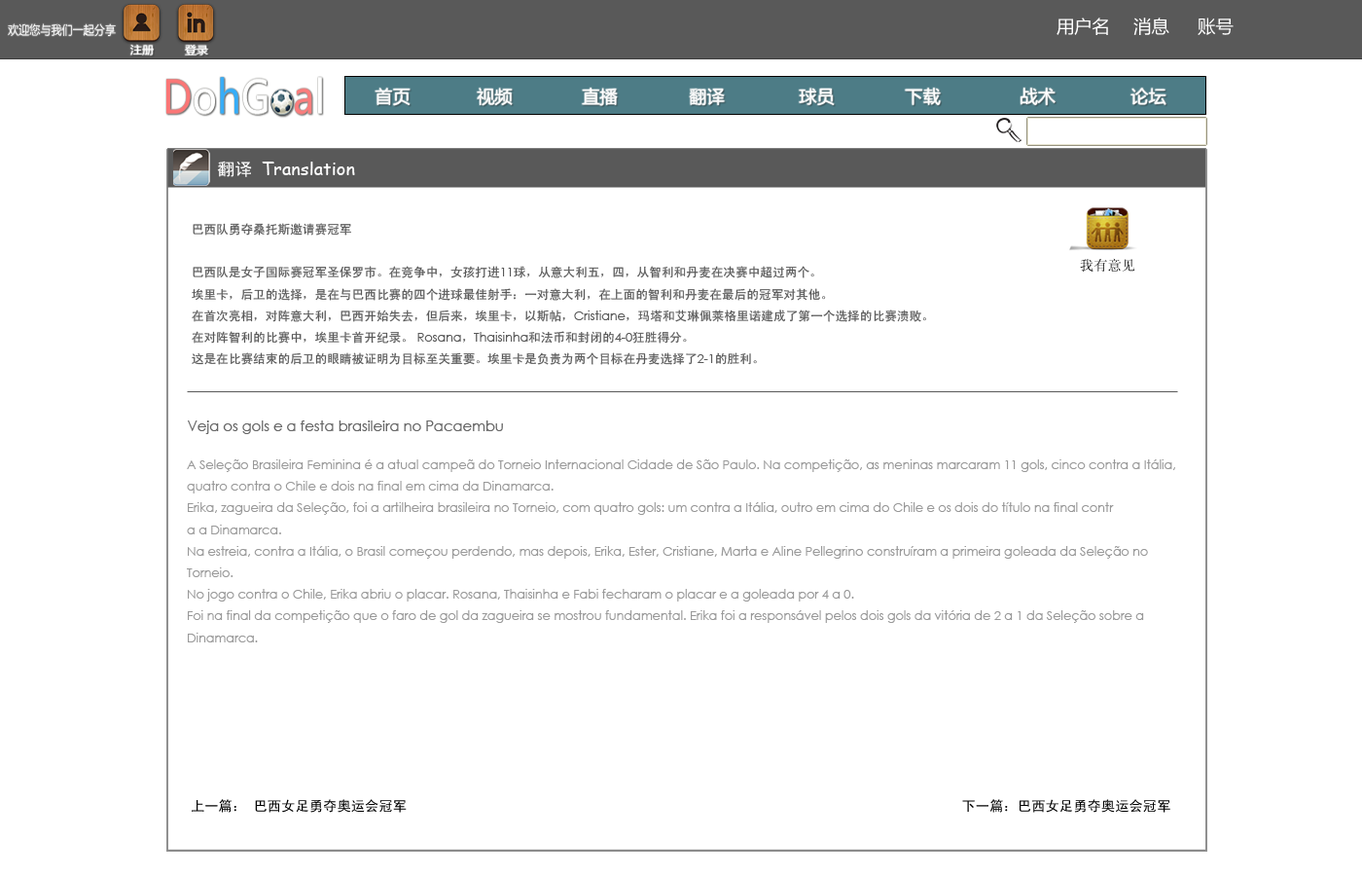
<style>
.page{position:relative;width:1362px;height:876px;background:#ffffff}
.page>*{position:absolute;margin:0}
.t1{font:17.8px "MicrosoftYaHei";color:#ffffff}
.t2{font:12.4px "MicrosoftYaHei";color:#ffffff;scale:0.87 1}
.t3{font:11px "MicrosoftYaHei";color:#ffffff;scale:1.05 1}
.t4{font:17.8px "ComicSansMS";color:#ffffff}
.t5{font:17.8px "SimHei";color:#ffffff}
.t6{font:12.3px "SimHei";color:#595959}
.t7{font:13.9px "SimSun";color:#000000}
.t8{font:12.3px "CenturyGothic";color:#595959}
.t9{font:14.3px "CenturyGothic";color:#666666}
.t10{font:12.3px "CenturyGothic";color:#999999}
.t11{font:13.9px "SimHei";color:#000000}
</style>
<div class="page">
<p class="t1" style="left:1056px;top:18px;width:52px;height:17px">用户名</p>
<p class="t1" style="left:1133px;top:18px;width:36px;height:17px">消息</p>
<p class="t1" style="left:1198px;top:18px;width:36px;height:17px">账号</p>
<p class="t2" style="left:8px;top:23px;width:108px;height:14px">欢迎您与我们一起分享</p>
<p class="t3" style="left:130px;top:44px;width:24px;height:11px">注册</p>
<p class="t3" style="left:185px;top:45px;width:23px;height:10px">登录</p>
<p class="t1" style="left:375px;top:88px;width:36px;height:18px">首页</p>
<p class="t1" style="left:477px;top:88px;width:36px;height:18px">视频</p>
<p class="t1" style="left:582px;top:88px;width:36px;height:18px">直播</p>
<p class="t1" style="left:689px;top:88px;width:36px;height:17px">翻译</p>
<p class="t1" style="left:799px;top:88px;width:36px;height:17px">球员</p>
<p class="t1" style="left:905px;top:88px;width:36px;height:17px">下载</p>
<p class="t1" style="left:1020px;top:88px;width:36px;height:17px">战术</p>
<p class="t1" style="left:1130px;top:88px;width:36px;height:17px">论坛</p>
<p class="t4" style="left:217px;top:161px;width:138px;height:16px"><span class="t5">翻译 </span>Translation</p>
<p class="t6" style="left:193px;top:223px;width:158px;height:12px">巴西队勇夺桑托斯邀请赛冠军</p>
<p class="t7" style="left:1080px;top:258px;width:55px;height:13px">我有意见</p>
<p class="t6" style="left:192px;top:266px;width:734px;height:99px">巴西队是女子国际赛冠军圣保罗市。在竞争中，女孩打进<span class="t8">11</span>球，从意大利五，四，从智利和丹麦在决赛中超过两个。<br>埃里卡，后卫的选择，是在与巴西比赛的四个进球最佳射手：一对意大利，在上面的智利和丹麦在最后的冠军对其他。<br>在首次亮相，对阵意大利，巴西开始失去，但后来，埃里卡，以斯帖，<span class="t8">Cristiane</span>，玛塔和艾琳佩莱格里诺建成了第一个选择的比赛溃败。<br>在对阵智利的比赛中，埃里卡首开纪录。<span class="t8"> Rosana</span>，<span class="t8">Thaisinha</span>和法币和封闭的<span class="t8">4-0</span>狂胜得分。<br>这是在比赛结束的后卫的眼睛被证明为目标至关重要。埃里卡是负责为两个目标在丹麦选择了<span class="t8">2-1</span>的胜利。</p>
<p class="t9" style="left:188px;top:420px;width:315px;height:14px">Veja os gols e a festa brasileira no Pacaembu</p>
<p class="t10" style="left:187px;top:459px;width:988px;height:183px">A Seleção Brasileira Feminina é a atual campeã do Torneio Internacional Cidade de São Paulo. Na competição, as meninas marcaram 11 gols, cinco contra a Itália, <br>quatro contra o Chile e dois na final em cima da Dinamarca.<br>Erika, zagueira da Seleção, foi a artilheira brasileira no Torneio, com quatro gols: um contra a Itália, outro em cima do Chile e os dois do título na final contr<br>a a Dinamarca.<br>Na estreia, contra a Itália, o Brasil começou perdendo, mas depois, Erika, Ester, Cristiane, Marta e Aline Pellegrino construíram a primeira goleada da Seleção no<br>Torneio.<br>No jogo contra o Chile, Erika abriu o placar. Rosana, Thaisinha e Fabi fecharam o placar e a goleada por 4 a 0.<br>Foi na final da competição que o faro de gol da zagueira se mostrou fundamental. Erika foi a responsável pelos dois gols da vitória de 2 a 1 da Seleção sobre a <br>Dinamarca.</p>
<p class="t11" style="left:192px;top:799px;width:215px;height:13px">上一篇： 巴西女足勇夺奥运会冠军</p>
<p class="t11" style="left:962px;top:799px;width:208px;height:13px">下一篇：巴西女足勇夺奥运会冠军</p>
</div>
